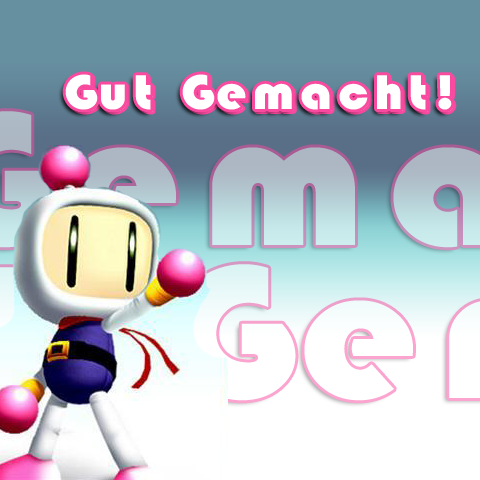
<style>
.page{position:relative;width:480px;height:480px}
.page>*{position:absolute;margin:0}
.t1{font:50.5px "STHupo";letter-spacing:0.1em;color:#ffffff;scale:1.09 1}
</style>
<div class="page">
<p class="t1" style="left:65px;top:74px;width:387px;height:36px">Gut Gemacht!</p>
<p class="t1" style="left:67px;top:76px;width:387px;height:36px">Gut Gemacht!</p>
</div>
